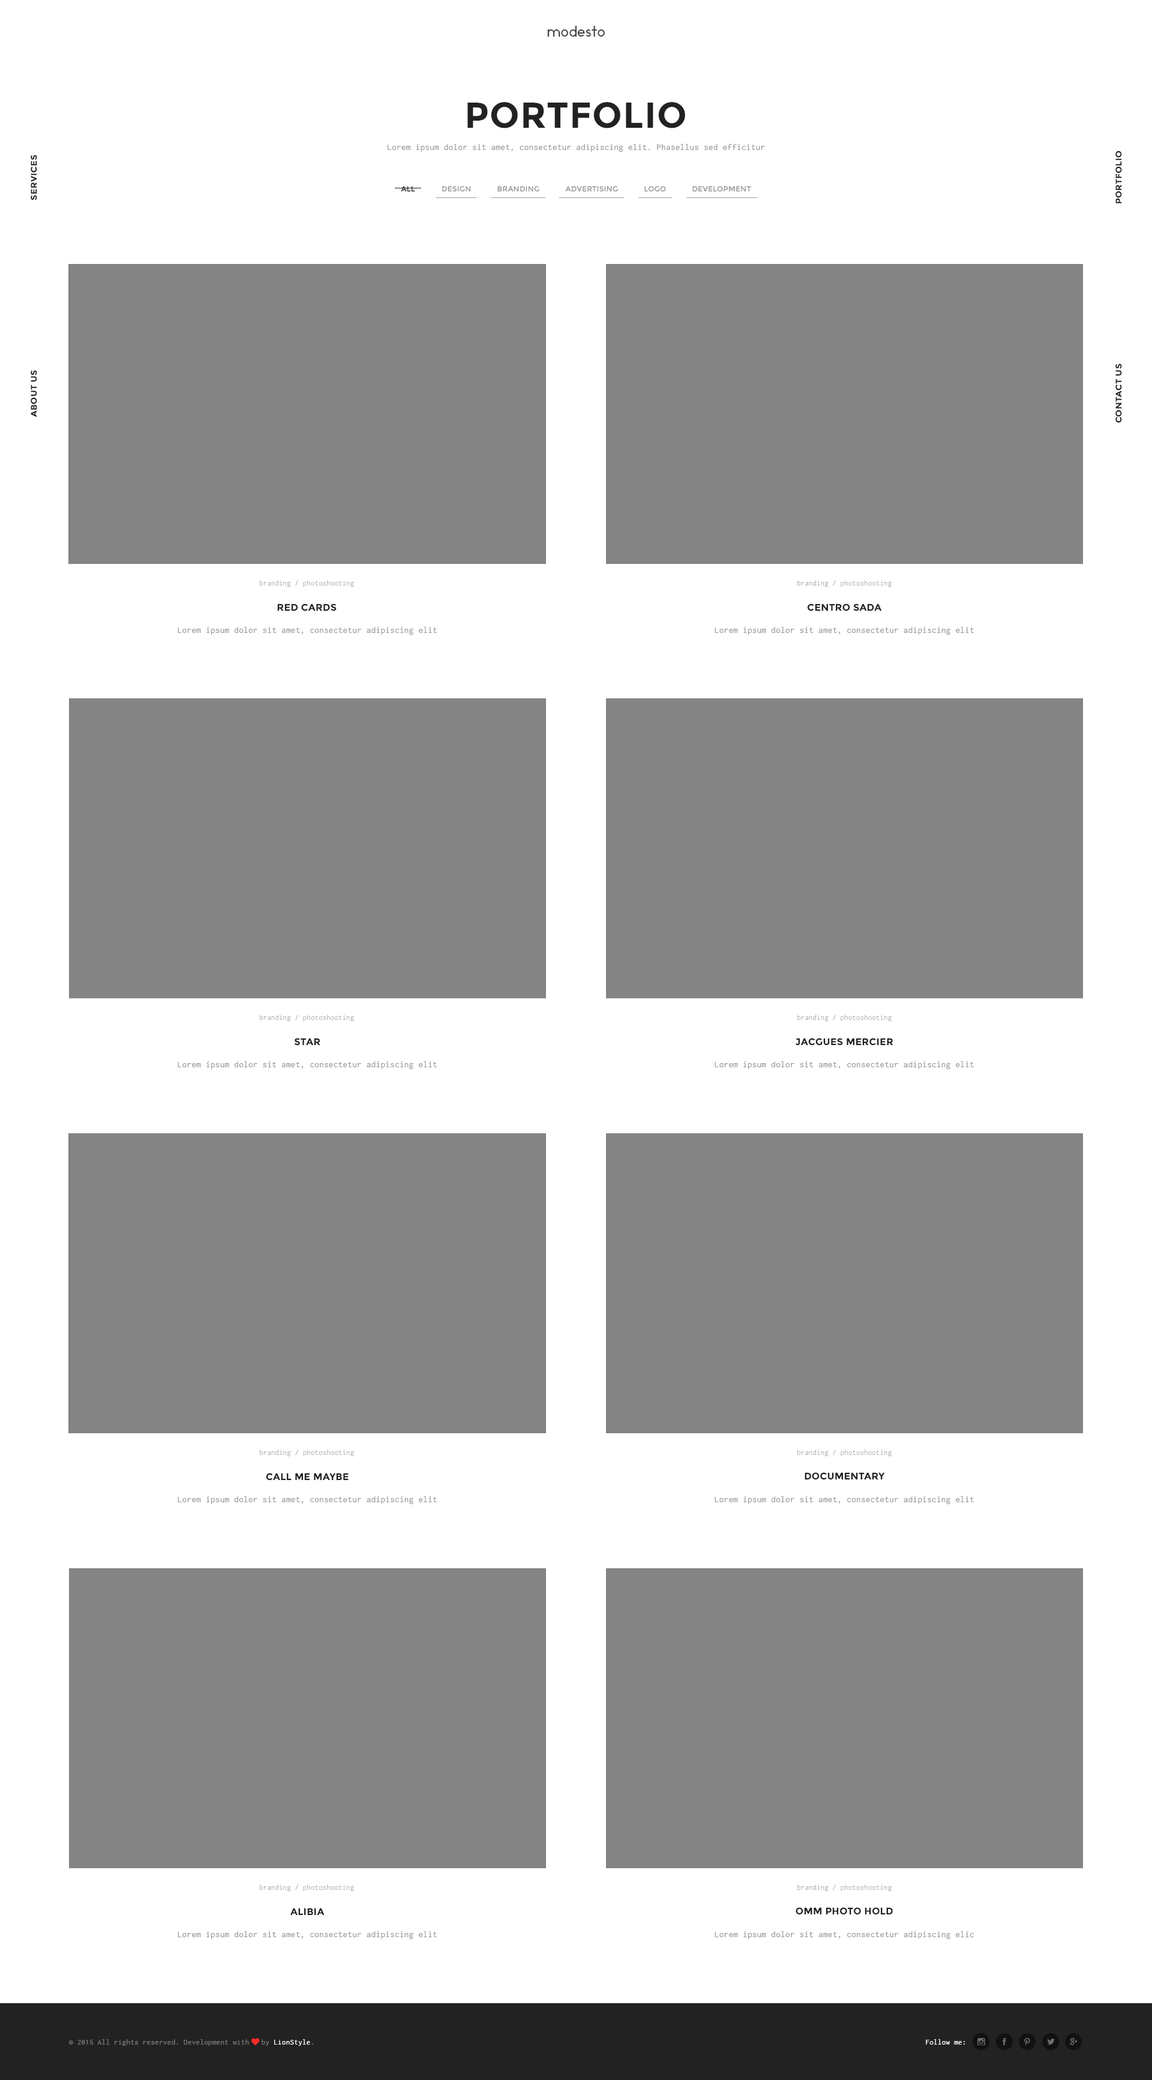
<style>
.page{position:relative;width:1152px;height:2080px;background:#ffffff}
.page>*{position:absolute;margin:0}
.t1{font:14.4px "Ikaros";letter-spacing:0.025em;color:#444444}
.t2{font:36px "Montserrat-Bold";letter-spacing:0.025em;color:#222222;text-transform:uppercase}
.t3{font:9px "Inconsolata";letter-spacing:0.025em;color:#989898}
.t4{font:8.4px "Montserrat-Bold";letter-spacing:0.025em;color:#222222;text-transform:uppercase;scale:1.03 1}
.t5{font:7.2px "Montserrat-Regular";letter-spacing:0.025em;color:#222222;text-transform:uppercase}
.t6{font:7.2px "Montserrat-Regular";letter-spacing:0.025em;color:#989898;text-transform:uppercase}
.t7{font:7.8px "Inconsolata";letter-spacing:0.025em;color:#989898;scale:0.97 1}
.t8{font:9.6px "Montserrat-Bold";letter-spacing:0.025em;color:#222222;text-transform:uppercase}
.t9{font:7.8px "Inconsolata";letter-spacing:0.025em;color:#777777}
.t10{font:7.8px "FontAwesome";letter-spacing:0.025em;color:#fe2b2b}
.t11{font:7.8px "Inconsolata";letter-spacing:0.025em;color:#ffffff}
.t12{font:7.8px "Inconsolata";letter-spacing:0.025em;color:#fefefe}
</style>
<div class="page">
<p class="t1" style="left:547px;top:26px;width:58px;height:11px">modesto</p>
<p class="t2" style="left:467px;top:102px;width:218px;height:26px">portfolio</p>
<p class="t3" style="left:388px;top:144px;width:377px;height:8px">Lorem ipsum dolor sit amet, consectetur adipiscing elit. Phasellus sed efficitur</p>
<p class="t4" style="left:31px;top:155px;width:6px;height:45px;rotate:-90deg">services</p>
<p class="t4" style="left:1115px;top:151px;width:7px;height:52px;rotate:-90deg">portfolio</p>
<p class="t5" style="left:401px;top:186px;width:14px;height:6px">all</p>
<p class="t6" style="left:442px;top:186px;width:309px;height:6px">design            branding            advertising            logo            development</p>
<p class="t4" style="left:1115px;top:364px;width:7px;height:59px;rotate:-90deg">contact us</p>
<p class="t4" style="left:31px;top:370px;width:6px;height:47px;rotate:-90deg">about us</p>
<p class="t7" style="left:260px;top:580px;width:94px;height:7px">branding / photoshooting</p>
<p class="t7" style="left:797px;top:580px;width:95px;height:7px">branding / photoshooting</p>
<p class="t8" style="left:277px;top:604px;width:60px;height:7px">red cards</p>
<p class="t8" style="left:808px;top:604px;width:74px;height:7px">centro sada</p>
<p class="t3" style="left:178px;top:627px;width:259px;height:8px">Lorem ipsum dolor sit amet, consectetur adipiscing elit</p>
<p class="t3" style="left:715px;top:627px;width:259px;height:8px">Lorem ipsum dolor sit amet, consectetur adipiscing elit</p>
<p class="t7" style="left:260px;top:1015px;width:94px;height:7px">branding / photoshooting</p>
<p class="t7" style="left:797px;top:1015px;width:95px;height:7px">branding / photoshooting</p>
<p class="t8" style="left:294px;top:1038px;width:26px;height:8px">star</p>
<p class="t8" style="left:796px;top:1038px;width:97px;height:8px">jacgues mercier</p>
<p class="t3" style="left:178px;top:1061px;width:259px;height:8px">Lorem ipsum dolor sit amet, consectetur adipiscing elit</p>
<p class="t3" style="left:715px;top:1061px;width:259px;height:8px">Lorem ipsum dolor sit amet, consectetur adipiscing elit</p>
<p class="t7" style="left:260px;top:1450px;width:94px;height:7px">branding / photoshooting</p>
<p class="t7" style="left:797px;top:1450px;width:95px;height:7px">branding / photoshooting</p>
<p class="t8" style="left:266px;top:1473px;width:83px;height:8px">call me maybe</p>
<p class="t8" style="left:805px;top:1472px;width:80px;height:8px">documentary</p>
<p class="t3" style="left:178px;top:1496px;width:259px;height:8px">Lorem ipsum dolor sit amet, consectetur adipiscing elit</p>
<p class="t3" style="left:715px;top:1496px;width:259px;height:8px">Lorem ipsum dolor sit amet, consectetur adipiscing elit</p>
<p class="t7" style="left:260px;top:1885px;width:94px;height:7px">branding / photoshooting</p>
<p class="t7" style="left:797px;top:1885px;width:95px;height:7px">branding / photoshooting</p>
<p class="t8" style="left:290px;top:1908px;width:35px;height:7px">alibia</p>
<p class="t8" style="left:796px;top:1907px;width:97px;height:8px">omm photo hold</p>
<p class="t3" style="left:178px;top:1931px;width:259px;height:8px">Lorem ipsum dolor sit amet, consectetur adipiscing elit</p>
<p class="t3" style="left:715px;top:1931px;width:259px;height:8px">Lorem ipsum dolor sit amet, consectetur adipiscing elic</p>
<p class="t9" style="left:69px;top:2038px;width:244px;height:8px">© 2015 All rights reserved. Development with <span class="t10">♥ </span>by <span class="t11">LionStyle</span>.</p>
<p class="t12" style="left:926px;top:2039px;width:39px;height:6px">Follow me:</p>
</div>
